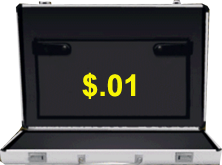
<style>
.page{position:relative;width:222px;height:165px}
.page>*{position:absolute;margin:0}
.t1{font:30px "Arial-BoldMT";color:#f8f505}
</style>
<div class="page">
<p class="t1" style="left:82px;top:72px;width:54px;height:27px">$.01</p>
</div>
